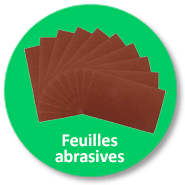
<style>
.page{position:relative;width:185px;height:185px;background:#00cc66}
.page>*{position:absolute;margin:0}
.t1{font:18px/16px "Calibri-Bold";color:#ffffff}
</style>
<div class="page">
<p class="t1" style="left:55px;top:133px;width:69px;height:30px;text-align:center">Feuilles  <br>abrasives</p>
</div>
